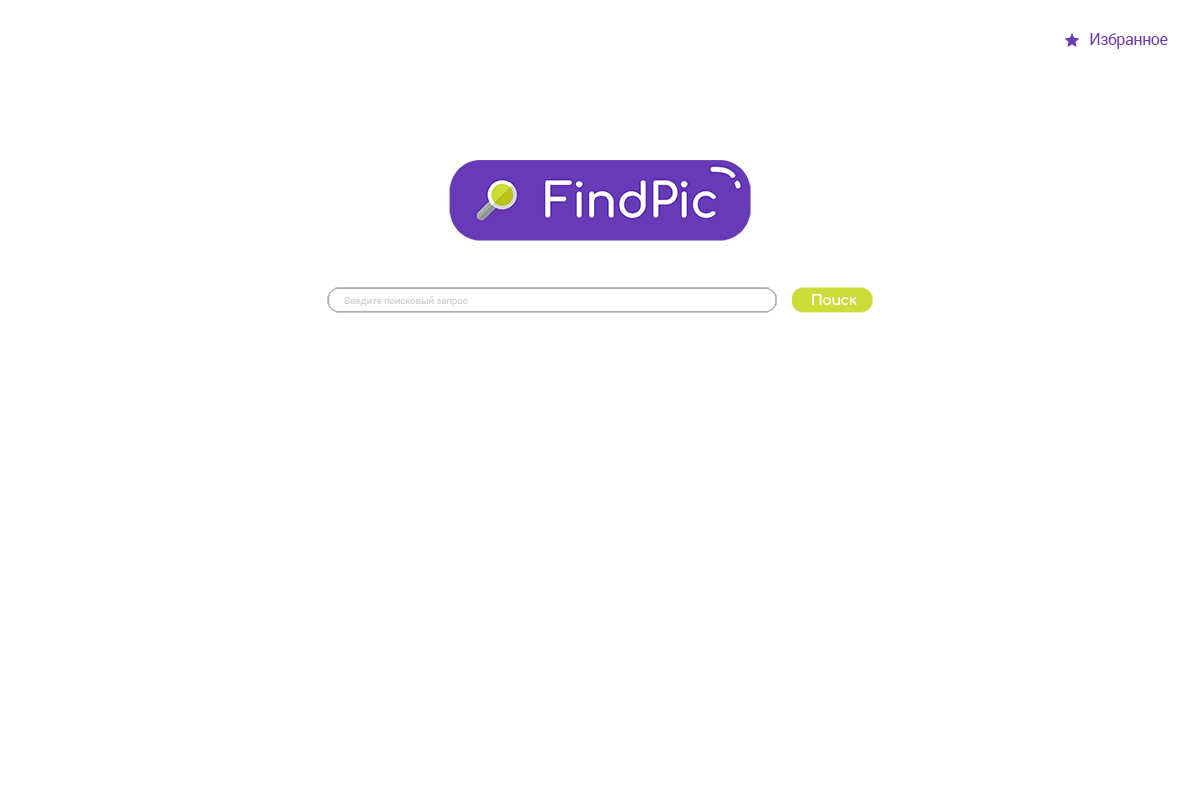
<style>
.page{position:relative;width:1200px;height:800px;background:#ffffff}
.page>*{position:absolute;margin:0}
.t1{font:16px "Roboto-Regular";letter-spacing:-0.025em;color:#673ab7}
.t2{font:14px "Comfortaa-Bold";letter-spacing:-0.025em;color:#ffffff}
.t3{font:10px "Roboto-Regular";letter-spacing:-0.025em;color:#d1d3d4}
</style>
<div class="page">
<p class="t1" style="left:1090px;top:33px;width:78px;height:16px">Избранное</p>
<p class="t2" style="left:812px;top:294px;width:45px;height:11px">Поиск</p>
<p class="t3" style="left:344px;top:296px;width:124px;height:10px">Введите поисковый запрос</p>
</div>
